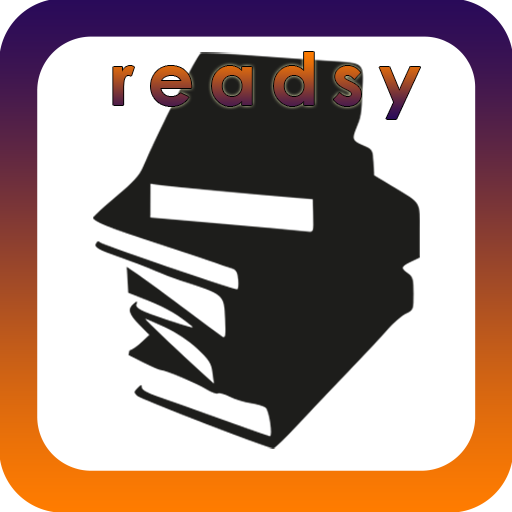
<style>
.page{position:relative;width:512px;height:512px;background:#ffffff}
.page>*{position:absolute;margin:0}
.t1{font:72px "CenturyGothic-Bold";letter-spacing:0.2em}
</style>
<div class="page">
<p class="t1" style="left:113px;top:52px;width:307px;height:67px">readsy</p>
</div>
